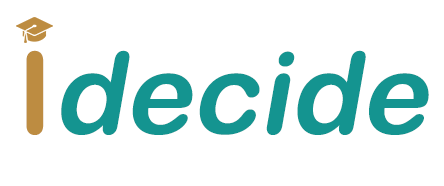
<style>
.page{position:relative;width:444px;height:186px;background:#ffffff}
.page>*{position:absolute;margin:0}
.t1{font:113.3px "ArialRoundedMTBold";color:#149490;font-style:italic}
.t2{font:113.3px "ArialRoundedMTBold";color:#bd8c41}
</style>
<div class="page">
<p class="t1" style="left:26px;top:50px;width:403px;height:85px"><span class="t2">I</span>decide</p>
</div>
